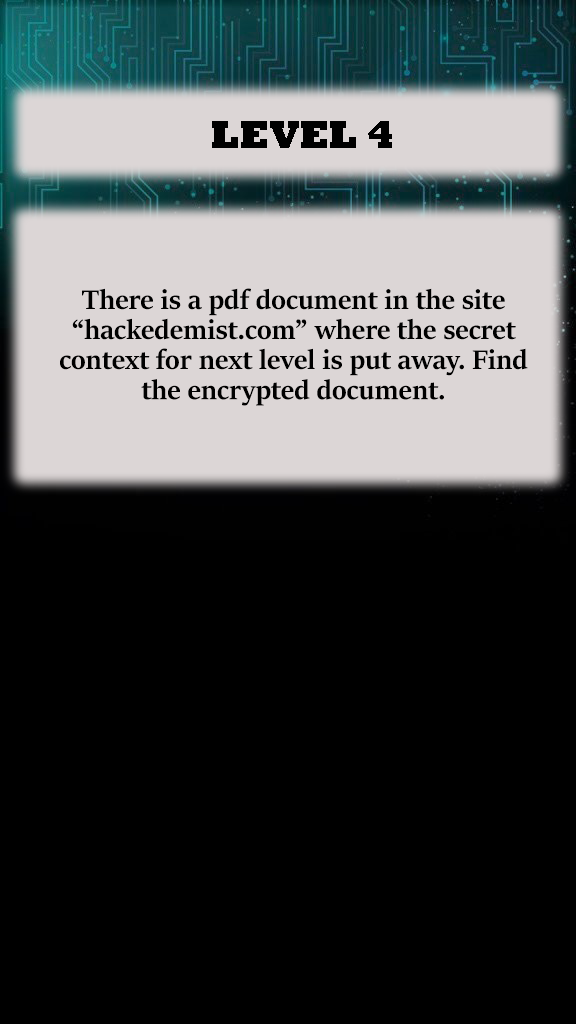
<style>
.page{position:relative;width:576px;height:1024px;background:#000000}
.page>*{position:absolute;margin:0}
.t1{font:40px "Rockwell-ExtraBold";color:#000000}
.t2{font:30px/10px "SitkaBanner-Bold";color:#000000}
</style>
<div class="page">
<p class="t1" style="left:212px;top:121px;width:180px;height:27px">LEVEL 4</p>
<p class="t2" style="left:60px;top:288px;width:468px;height:118px;text-align:center">There is a pdf document in the site <br><br><br>“hackedemist.com” where the secret <br><br><br>context for next level is put away. Find <br><br><br>the encrypted document.</p>
</div>
